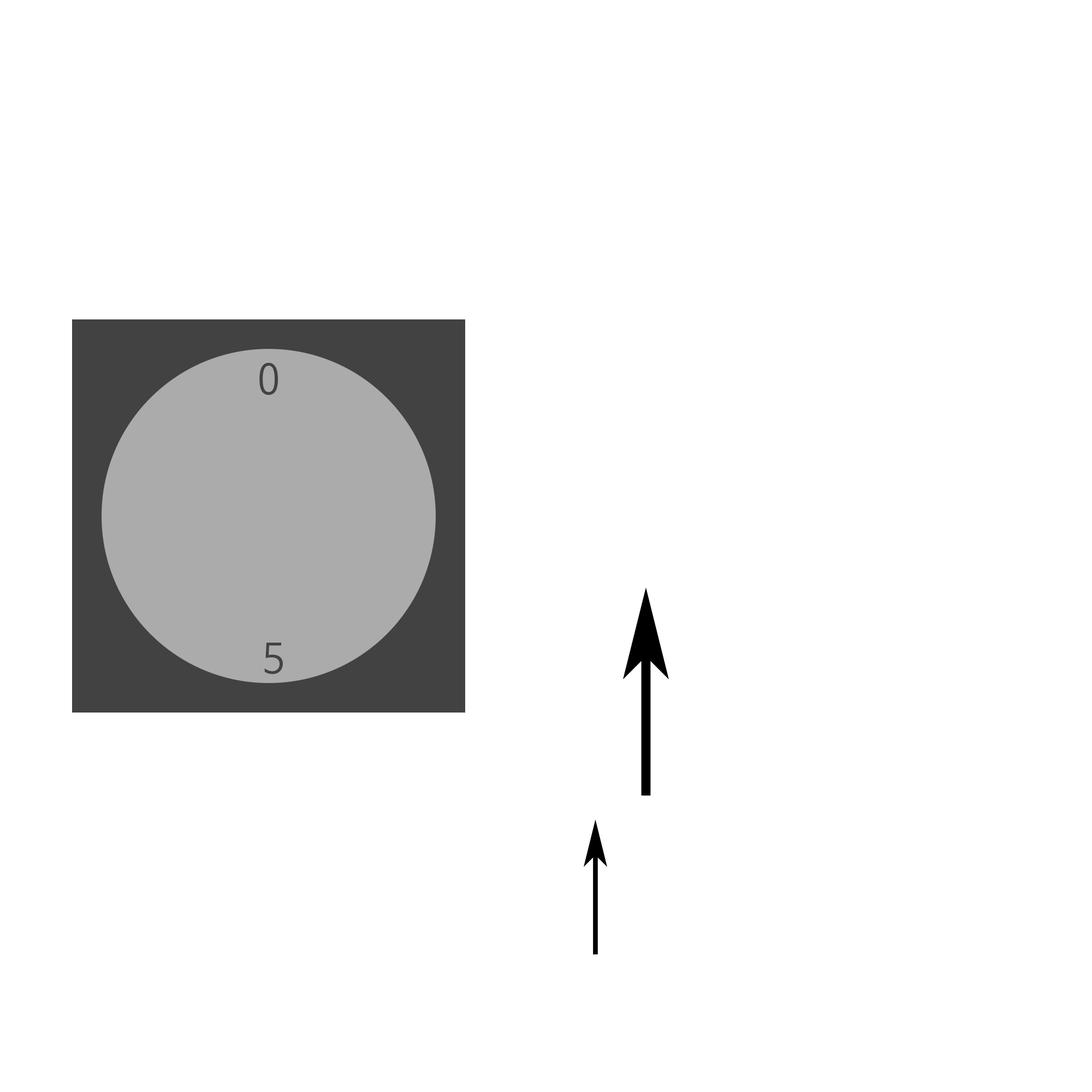
<style>
.page{position:relative;width:1092px;height:1092px;background:#ffffff}
.page>*{position:absolute;margin:0}
.t1{font:40.9px "NanumBarunGothic";letter-spacing:-0.05em;color:#424242;scale:0.92 1}
</style>
<div class="page">
<p class="t1" style="left:259px;top:363px;width:19px;height:32px">0</p>
<p class="t1" style="left:264px;top:643px;width:19px;height:31px">5</p>
</div>
